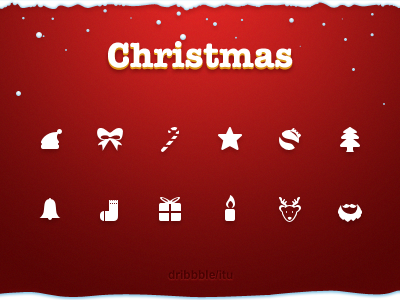
<style>
.page{position:relative;width:400px;height:300px}
.page>*{position:absolute;margin:0}
.t1{font:36px "AmericanTypewriter-Bold";color:#ffffff}
.t2{font:12px "Arial-BoldMT";color:#3e0303}
</style>
<div class="page">
<p class="t1" style="left:108px;top:41px;width:185px;height:27px">Christmas</p>
<p class="t1" style="left:108px;top:43px;width:185px;height:27px">Christmas</p>
<p class="t2" style="left:168px;top:270px;width:65px;height:9px">dribbble/itu</p>
</div>
